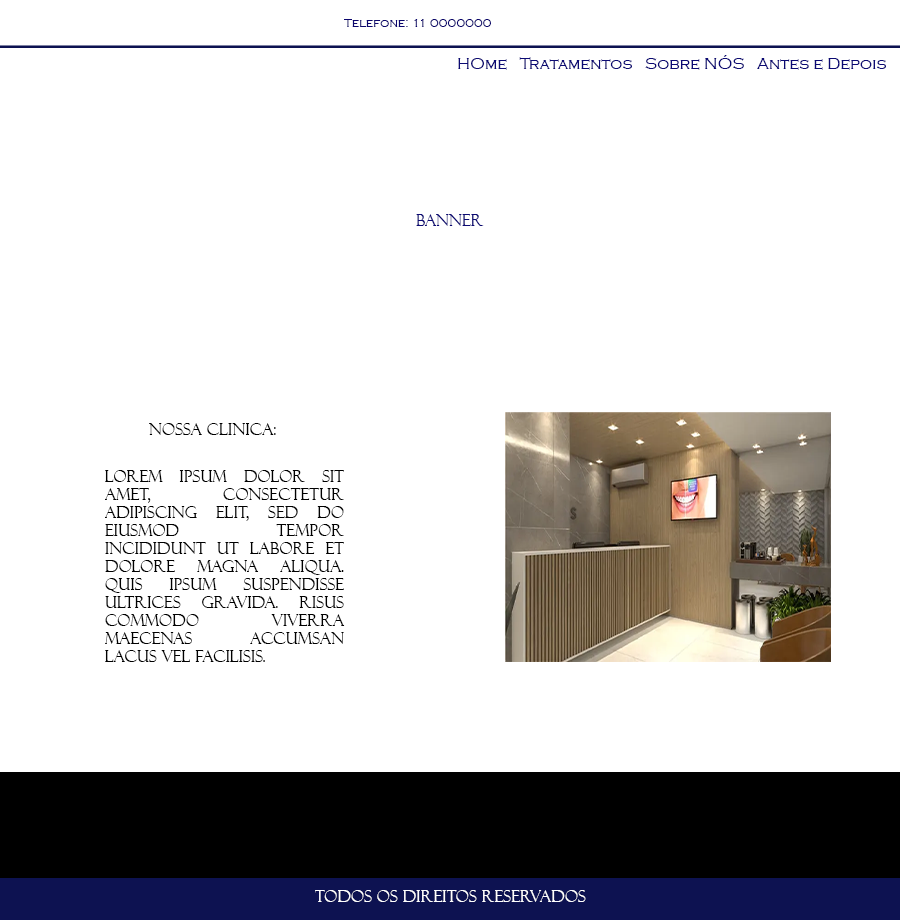
<style>
.page{position:relative;width:900px;height:920px;background:#ffffff}
.page>*{position:absolute;margin:0}
.t1{font:12px "CopperplateGothic-Light";letter-spacing:0.01em;color:#0b066d}
.t2{font:16px "CopperplateGothic-Light";letter-spacing:0.01em;color:#0c0a74}
.t3{font:16px "FelixTitlingMT";letter-spacing:0.01em;color:#0c0a74}
.t4{font:16px "FelixTitlingMT";letter-spacing:0.01em;color:#000000}
.t5{font:16px/18px "FelixTitlingMT";letter-spacing:0.01em;color:#000000}
.t6{font:16px "FelixTitlingMT";letter-spacing:0.01em;color:#ffffff}
</style>
<div class="page">
<p class="t1" style="left:344px;top:19px;width:147px;height:8px">Telefone: 11 0000000</p>
<p class="t2" style="left:458px;top:55px;width:428px;height:15px">HOme   Tratamentos   Sobre NÓS   Antes e Depois</p>
<p class="t3" style="left:416px;top:214px;width:68px;height:12px">Banner</p>
<p class="t4" style="left:149px;top:423px;width:127px;height:12px">Nossa Clinica:</p>
<p class="t5" style="left:105px;top:470px;width:240px;height:192px;text-align:justify">Lorem ipsum dolor sit amet, consectetur adipiscing elit, sed do eiusmod tempor incididunt ut labore et dolore magna aliqua. Quis ipsum suspendisse ultrices gravida. Risus commodo viverra maecenas accumsan lacus vel facilisis.</p>
<p class="t6" style="left:315px;top:890px;width:271px;height:12px">todos os direitos reservados</p>
</div>
